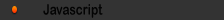
<style>
.page{position:relative;width:224px;height:20px;background:#333333}
.page>*{position:absolute;margin:0}
.t1{font:14.9px "ArialRoundedMTBold";color:#030303;scale:0.78 1}
</style>
<div class="page">
<p class="t1" style="left:43px;top:4px;width:60px;height:14px">Javascript</p>
</div>
